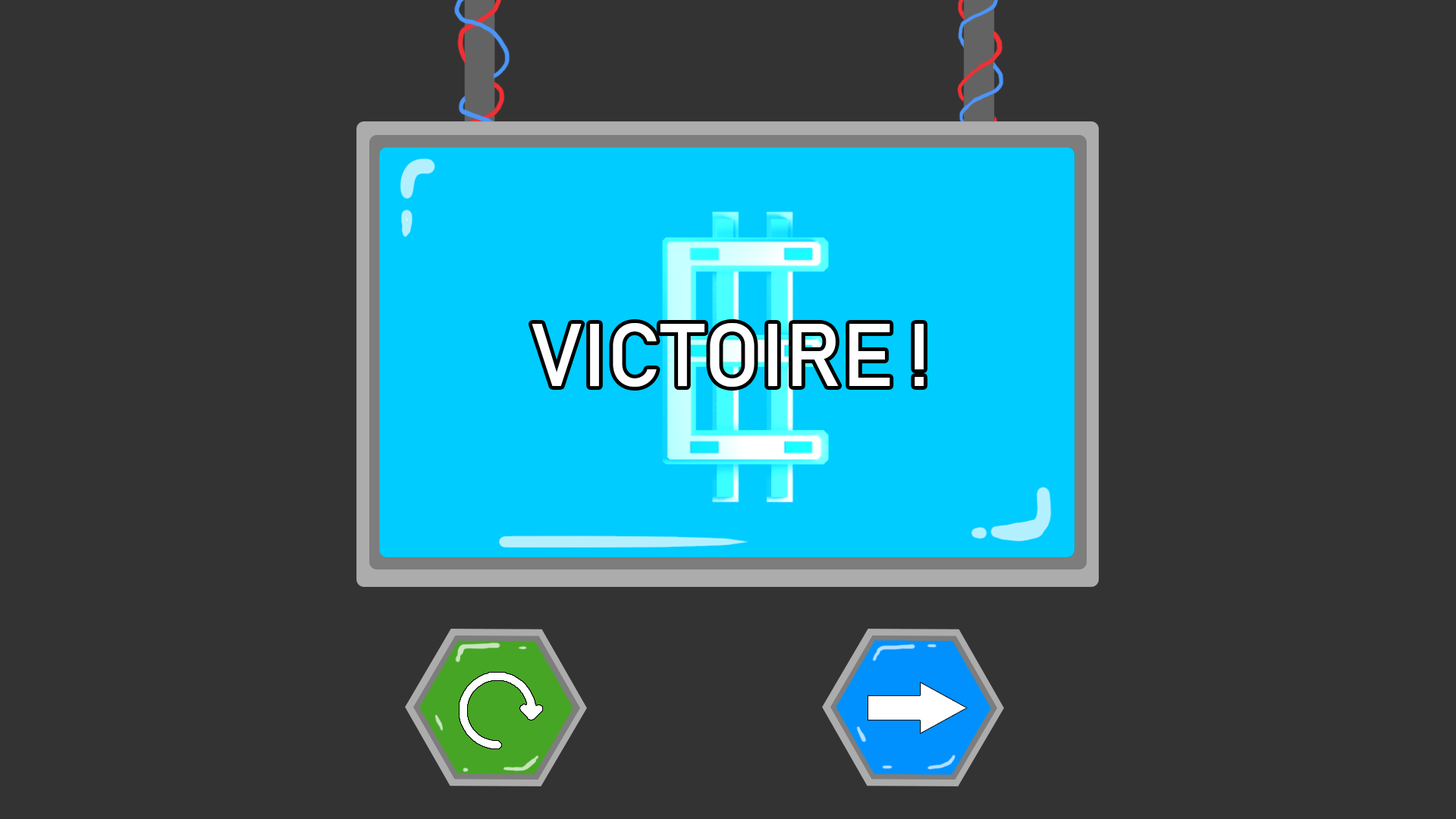
<style>
.page{position:relative;width:1456px;height:819px;background:#333333}
.page>*{position:absolute;margin:0}
.t1{font:88.1px "Bahnschrift";color:#ffffff}
</style>
<div class="page">
<p class="t1" style="left:532px;top:323px;width:392px;height:64px">VICTOIRE !</p>
</div>
